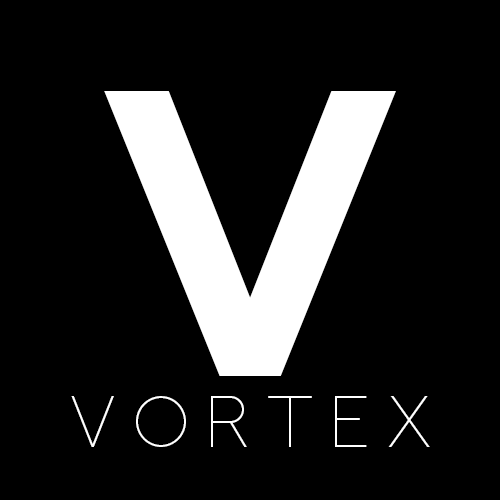
<style>
.page{position:relative;width:500px;height:500px;background:#000000}
.page>*{position:absolute;margin:0}
.t1{font:406.7px "NEXTART-Bold";color:#ffffff}
.t2{font:72px "NEXTART-Thin";color:#ffffff}
</style>
<div class="page">
<p class="t1" style="left:104px;top:91px;width:292px;height:285px">V</p>
<p class="t2" style="left:71px;top:396px;width:359px;height:51px">V O R T E X</p>
</div>
